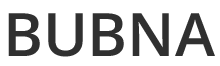
<style>
.page{position:relative;width:220px;height:66px;background:#ffffff}
.page>*{position:absolute;margin:0}
.t1{font:59.7px "OpenSans-Semibold";color:#303030;text-transform:uppercase}
</style>
<div class="page">
<p class="t1" style="left:8px;top:13px;width:207px;height:44px">BUBNA</p>
</div>
